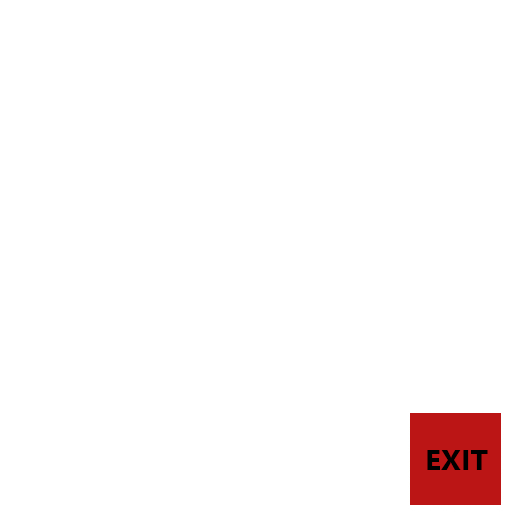
<style>
.page{position:relative;width:512px;height:512px;background:#ffffff}
.page>*{position:absolute;margin:0}
.t1{font:28.1px "NirmalaUI-Bold";color:#000000;scale:1.08 1}
</style>
<div class="page">
<p class="t1" style="left:427px;top:450px;width:61px;height:20px">EXIT</p>
</div>
